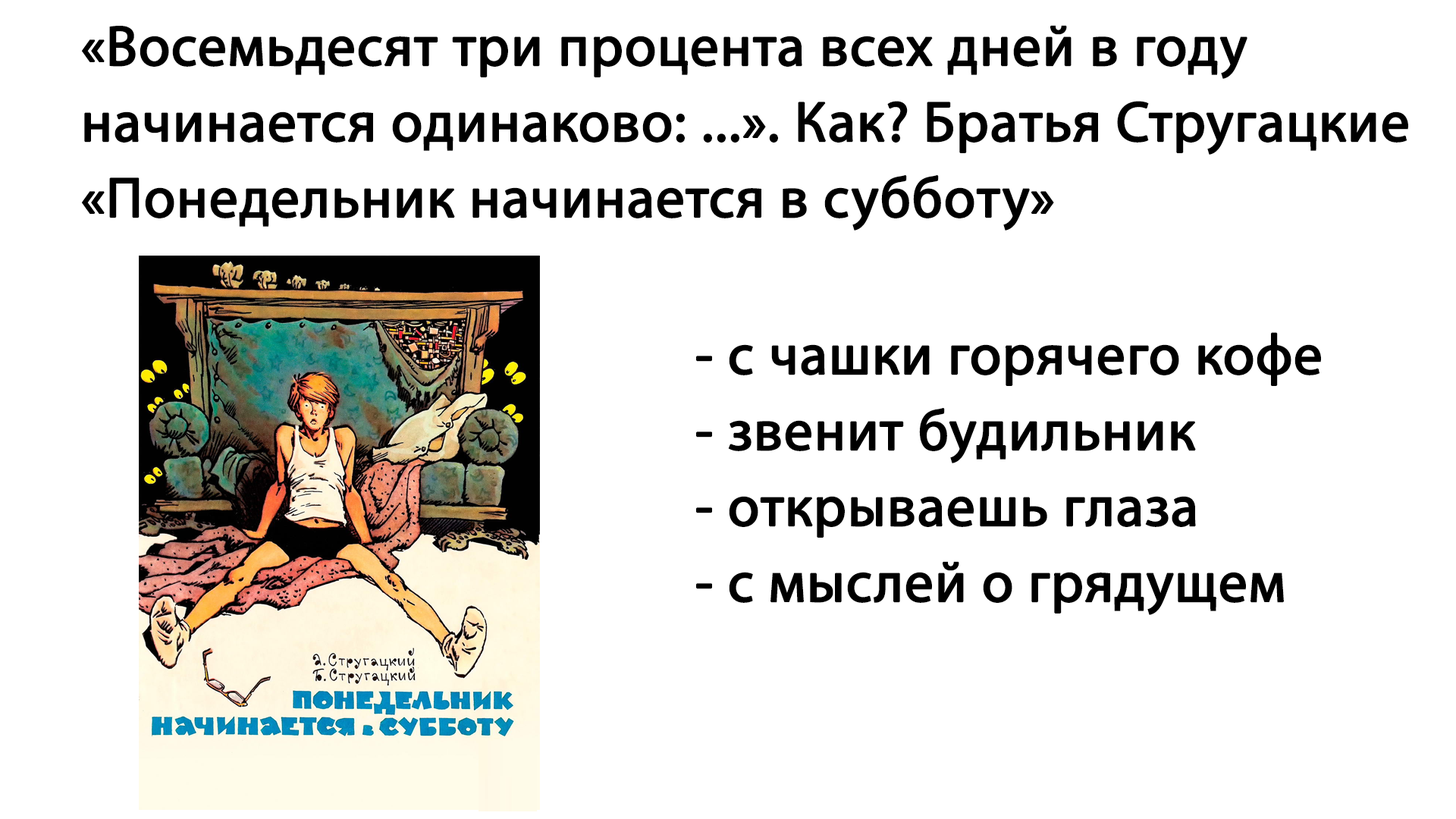
<style>
.page{position:relative;width:1456px;height:819px;background:#ffffff}
.page>*{position:absolute;margin:0}
.t1{font:56.9px/75.8px "MyriadPro-Regular";color:#000000;font-weight:bold}
</style>
<div class="page">
<p class="t1" style="left:81px;top:25px;width:1327px;height:206px">«Восемьдесят три процента всех дней в году <br>начинается одинаково: ...». Как? Братья Стругацкие <br>«Понедельник начинается в субботу»</p>
<p class="t1" style="left:696px;top:332px;width:625px;height:283px">- с чашки горячего кофе<br>- звенит будильник<br>- открываешь глаза<br>- с мыслей о грядущем</p>
</div>
